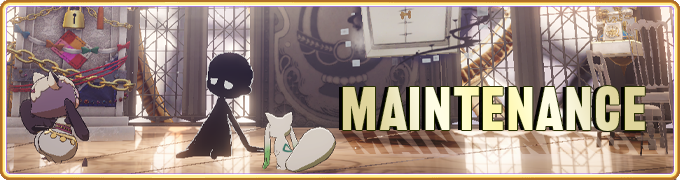
<style>
.page{position:relative;width:680px;height:180px}
.page>*{position:absolute;margin:0}
.t1{font:59.8px "RailroadGothicATF";letter-spacing:0.025em;text-transform:uppercase}
</style>
<div class="page">
<p class="t1" style="left:343px;top:86px;width:302px;height:45px">Maintenance</p>
</div>
